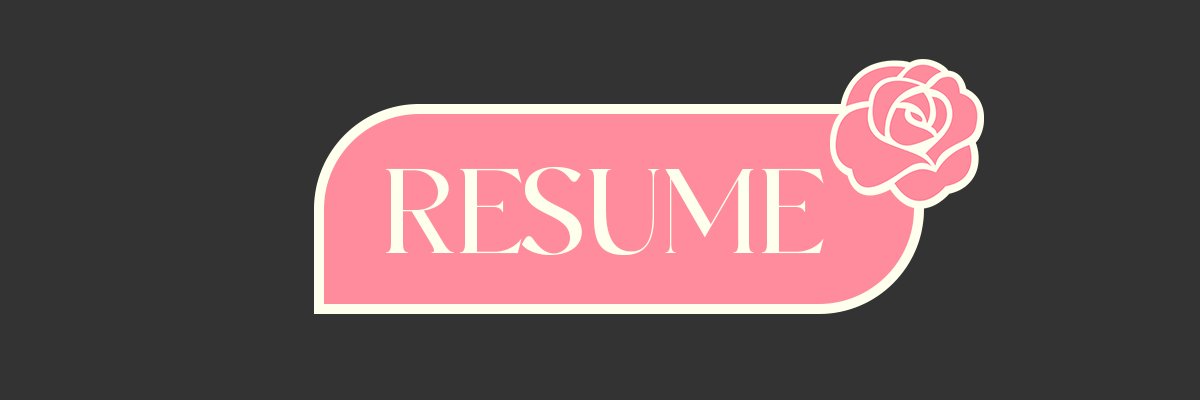
<style>
.page{position:relative;width:1200px;height:400px;background:#333333}
.page>*{position:absolute;margin:0}
.t1{font:120px "BelganAesthetic-Regular";color:#ffffed}
</style>
<div class="page">
<p class="t1" style="left:386px;top:166px;width:438px;height:89px">RESUME</p>
</div>
